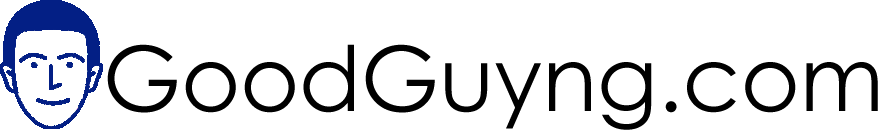
<style>
.page{position:relative;width:878px;height:130px;background:#ffffff}
.page>*{position:absolute;margin:0}
.t1{font:90px "CenturyGothic";color:#000000}
</style>
<div class="page">
<p class="t1" style="left:107px;top:44px;width:771px;height:86px">GoodGuyng.com</p>
</div>
